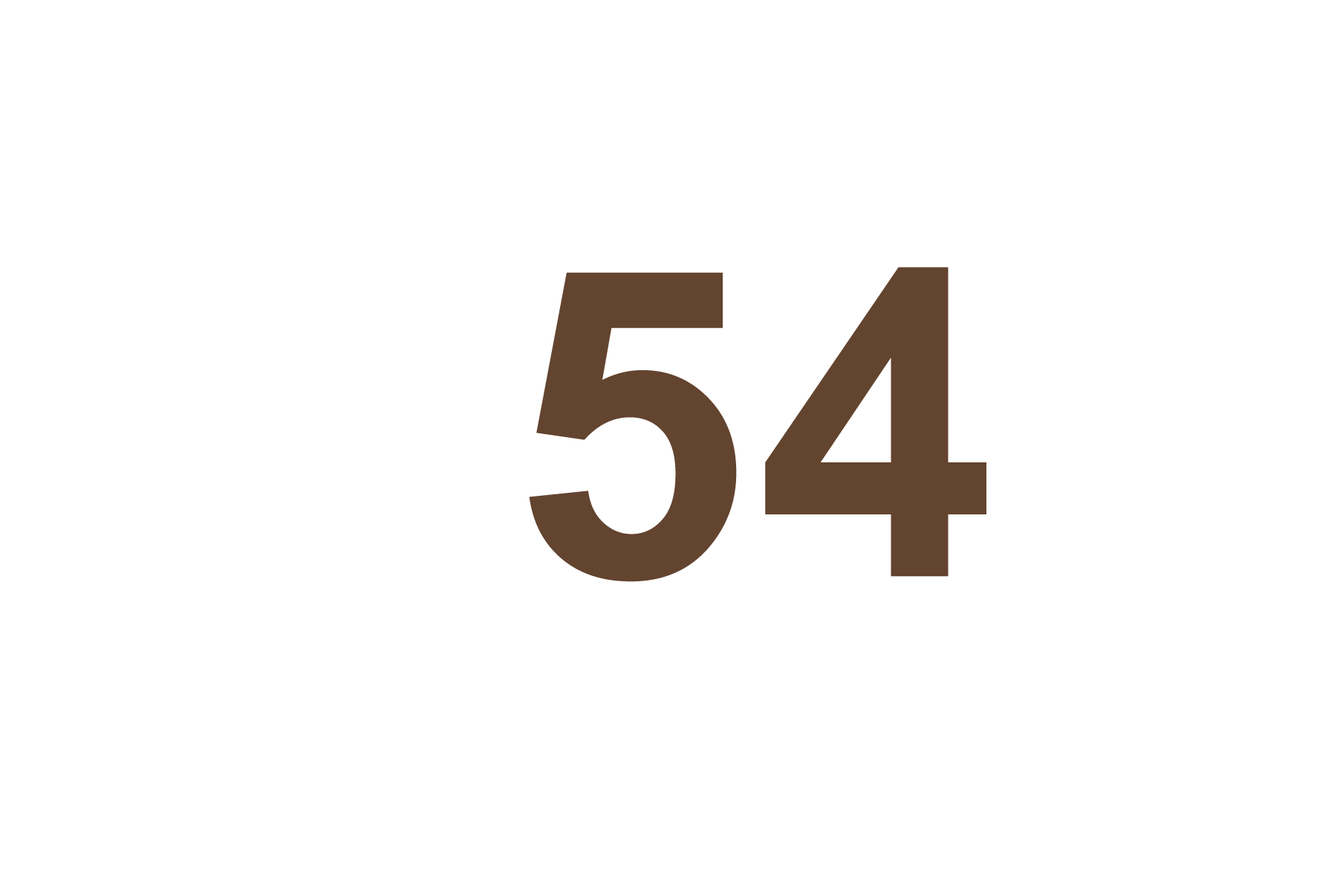
<style>
.page{position:relative;width:1337px;height:892px;background:#ffffff}
.page>*{position:absolute;margin:0}
.t1{font:429.6px "Arial-BoldMT";color:#63442f}
</style>
<div class="page">
<p class="t1" style="left:529px;top:267px;width:458px;height:315px">54</p>
</div>
